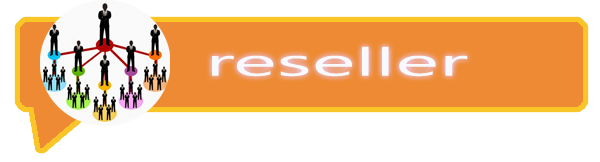
<style>
.page{position:relative;width:600px;height:162px;background:#ffffff}
.page>*{position:absolute;margin:0}
.t1{font:35.9px "MicrosoftJhengHeiUIRegular";color:#f7f9fe;scale:2.15 1}
</style>
<div class="page">
<p class="t1" style="left:212px;top:46px;width:256px;height:31px">reseller</p>
</div>
